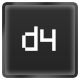
<style>
.page{position:relative;width:80px;height:80px}
.page>*{position:absolute;margin:0}
.t1{font:48px "Kenney-Pixel";color:#ffffff}
</style>
<div class="page">
<p class="t1" style="left:22px;top:26px;width:34px;height:25px">d4</p>
</div>
